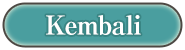
<style>
.page{position:relative;width:185px;height:50px;background:#4a9e9f}
.page>*{position:absolute;margin:0}
.t1{font:26px "RyuminPro-ExBold";letter-spacing:-0.04em;color:#ffffff}
</style>
<div class="page">
<p class="t1" style="left:46px;top:15px;width:95px;height:20px">Kembali</p>
</div>
